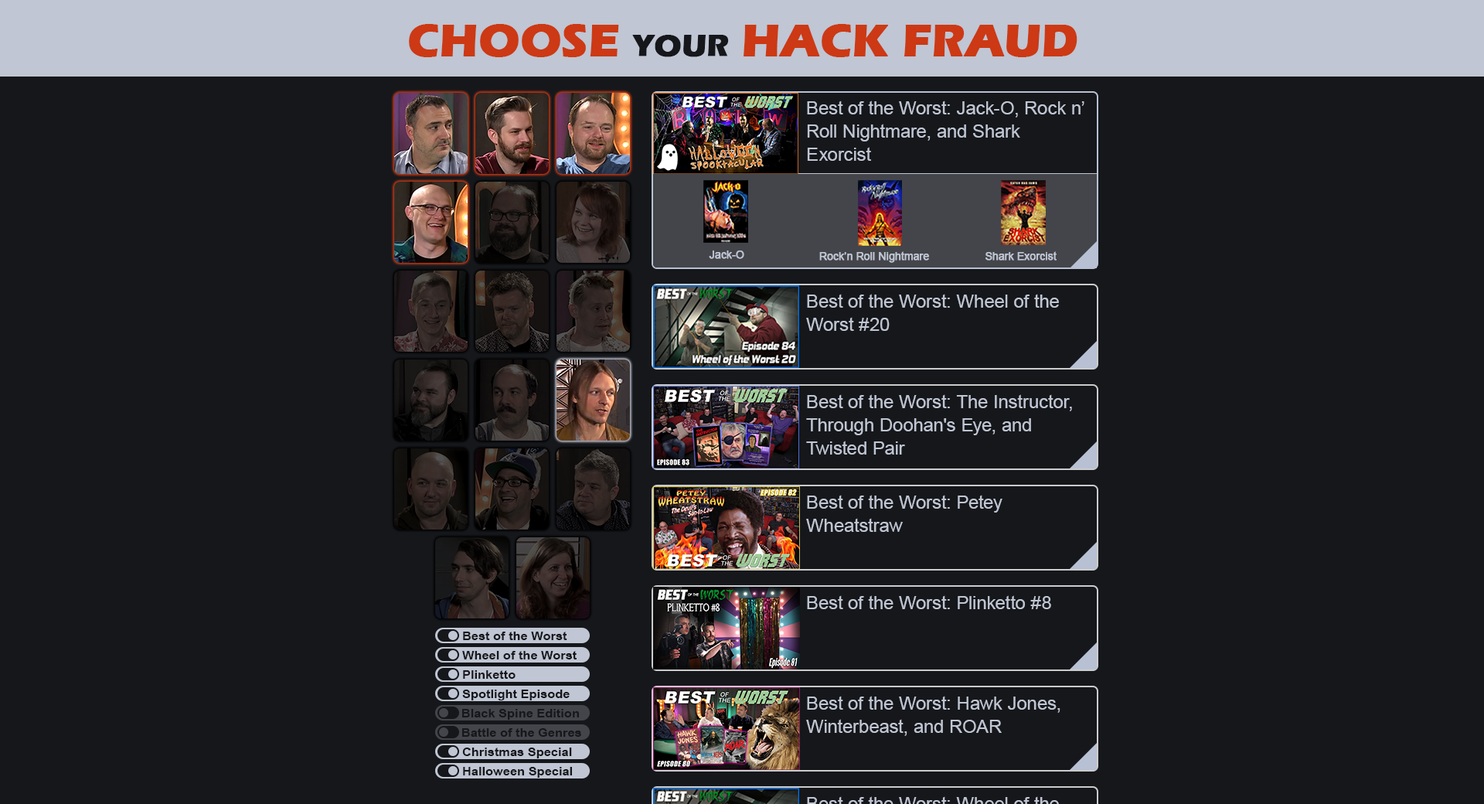
<style>
.page{position:relative;width:1484px;height:804px;background:#15171b}
.page>*{position:absolute;margin:0}
.t1{font:46.4px "ErasITC-Bold";color:#cc3914;text-transform:uppercase;font-weight:bold}
.t2{font:30.9px "ErasITC-Bold";color:#15171b;text-transform:uppercase;font-weight:bold}
.t3{font:18.5px/23.2px "ArialMT";color:#c0c6d3}
.t4{font:10.4px "ArialMT";color:#c0c6d3;font-weight:bold}
.t5{font:18.5px "ArialMT";color:#c0c6d3}
.t6{font:12.4px "ArialNarrow-Bold";color:#15171b;scale:1.25 1}
</style>
<div class="page">
<p class="t1" style="left:409px;top:24px;width:668px;height:33px">Choose <span class="t2">Your </span>Hack Fraud</p>
<p class="t3" style="left:807px;top:100px;width:277px;height:61px">Best of the Worst: Jack-O, Rock n’ Roll Nightmare, and Shark Exorcist</p>
<p class="t4" style="left:709px;top:250px;width:35px;height:9px">Jack-O</p>
<p class="t4" style="left:819px;top:251px;width:110px;height:12px">Rock’n Roll Nightmare</p>
<p class="t4" style="left:985px;top:251px;width:71px;height:9px">Shark Exorcist</p>
<p class="t3" style="left:806px;top:294px;width:253px;height:37px">Best of the Worst: Wheel of the Worst #20</p>
<p class="t3" style="left:806px;top:394px;width:266px;height:60px">Best of the Worst: The Instructor, Through Doohan's Eye, and Twisted Pair</p>
<p class="t3" style="left:806px;top:495px;width:196px;height:37px">Best of the Worst: Petey Wheatstraw</p>
<p class="t5" style="left:807px;top:595px;width:244px;height:14px">Best of the Worst: Plinketto #8</p>
<p class="t6" style="left:463px;top:631px;width:104px;height:9px">Best of the Worst</p>
<p class="t6" style="left:462px;top:651px;width:114px;height:8px">Wheel of the Worst</p>
<p class="t6" style="left:463px;top:670px;width:52px;height:8px">Plinketto</p>
<p class="t6" style="left:462px;top:689px;width:108px;height:11px">Spotlight Episode</p>
<p class="t3" style="left:806px;top:695px;width:254px;height:41px">Best of the Worst: Hawk Jones, Winterbeast, and ROAR</p>
<p class="t6" style="left:462px;top:709px;width:117px;height:10px">Black Spine Edition</p>
<p class="t6" style="left:462px;top:728px;width:119px;height:8px">Battle of the Genres</p>
<p class="t6" style="left:462px;top:747px;width:110px;height:11px">Christmas Special</p>
<p class="t6" style="left:463px;top:767px;width:109px;height:10px">Halloween Special</p>
</div>
